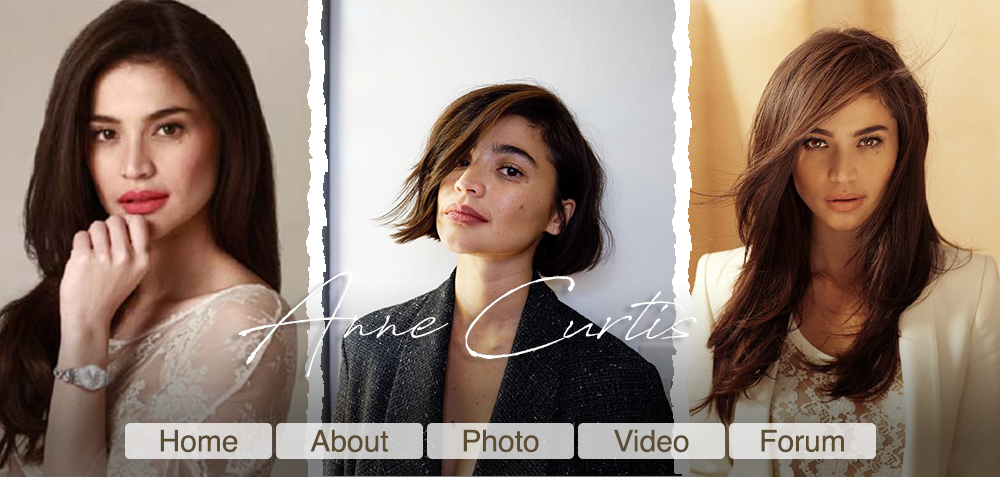
<style>
.page{position:relative;width:1000px;height:477px}
.page>*{position:absolute;margin:0}
.t1{font:76px "AntroVectra";color:#ffffff}
.t2{font:98px "AntroVectra";color:#ffffff}
.t3{font:30px "Helvetica";color:#5c4c31}
</style>
<div class="page">
<p class="t1" style="left:238px;top:271px;width:459px;height:106px"><span class="t2">A</span>nne <span class="t2">C</span>urtis</p>
<p class="t3" style="left:160px;top:429px;width:78px;height:24px">Home</p>
<p class="t3" style="left:310px;top:429px;width:78px;height:24px">About</p>
<p class="t3" style="left:463px;top:429px;width:76px;height:24px">Photo</p>
<p class="t3" style="left:614px;top:429px;width:75px;height:24px">Video</p>
<p class="t3" style="left:761px;top:429px;width:83px;height:24px">Forum</p>
</div>
